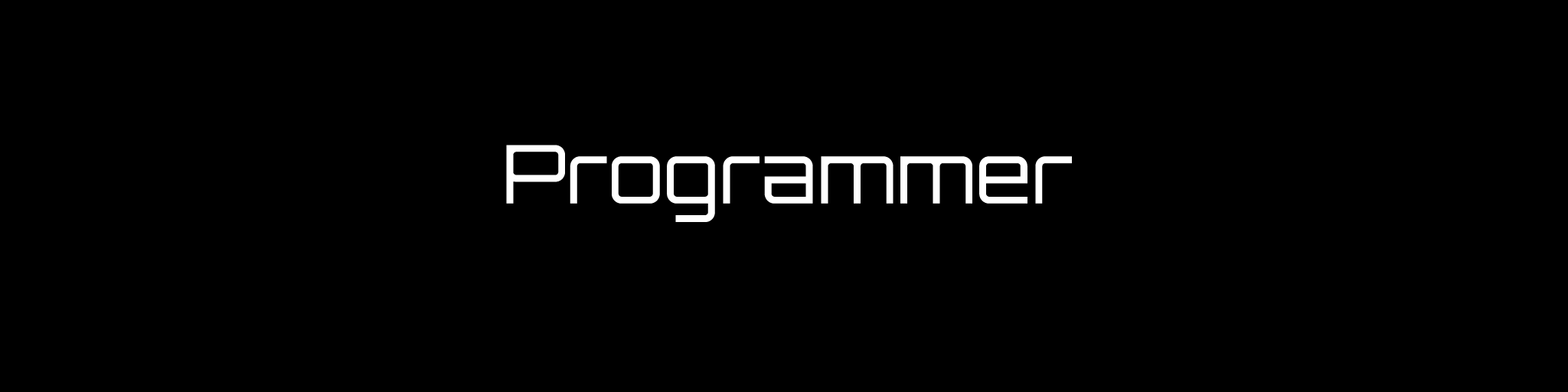
<style>
.page{position:relative;width:1568px;height:392px;background:#000000}
.page>*{position:absolute;margin:0}
.t1{font:81px "Orbitron-Light";color:#ffffff}
.t2{font:48.6px "Orbitron-Light";color:#ffffff}
</style>
<div class="page">
<p class="t1" style="left:506px;top:145px;width:566px;height:77px;text-align:center"><span class="t2"><br></span>Programmer<br><br>mmer</p>
</div>
